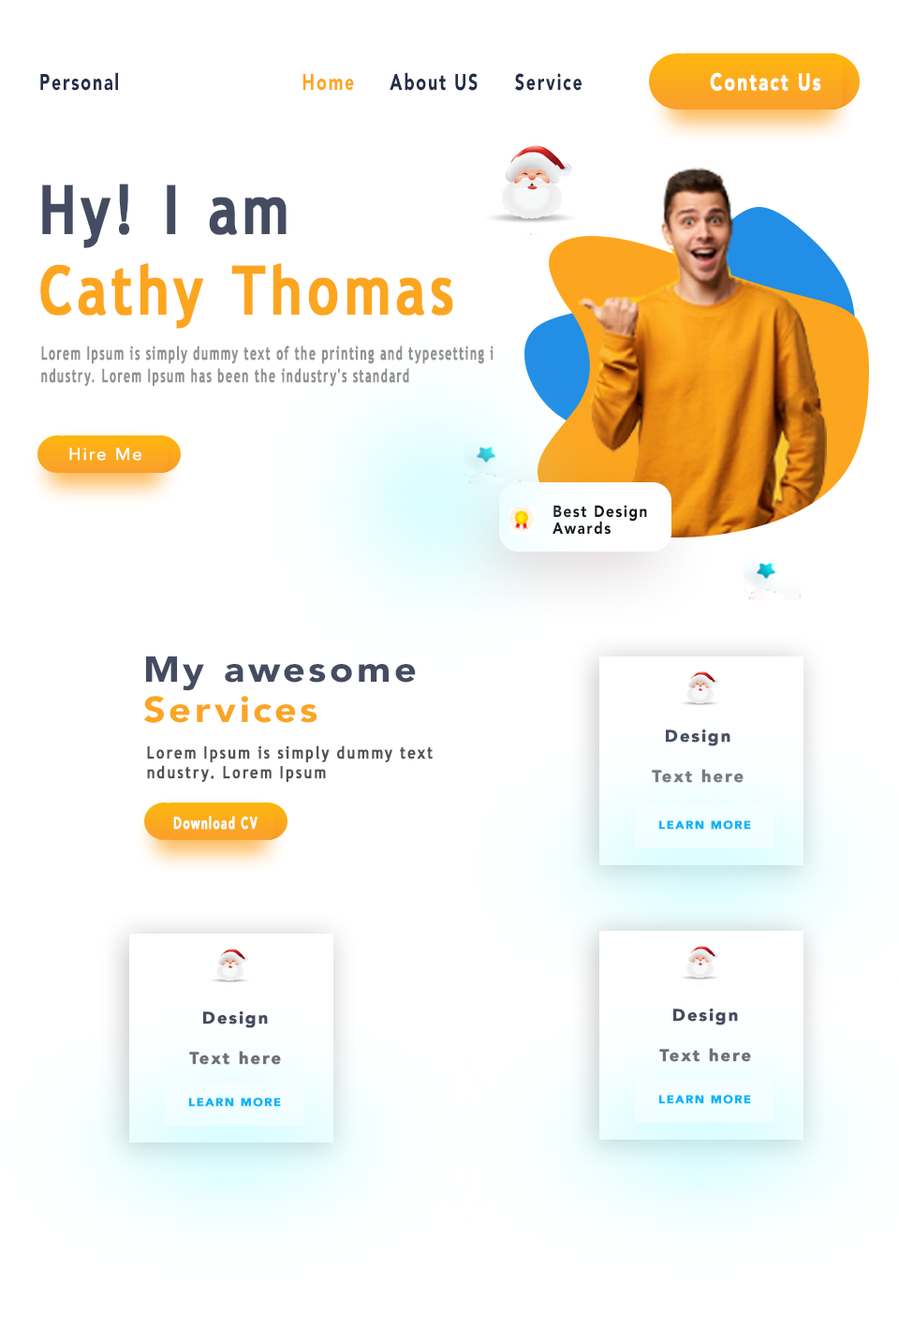
<style>
.page{position:relative;width:899px;height:1326px;background:#ffffff}
.page>*{position:absolute;margin:0}
.t1{font:22.5px "AvenirLTStd-Black";letter-spacing:0.1em;color:#242d49;scale:0.74 1}
.t2{font:22.5px "AvenirLTStd-Black";letter-spacing:0.1em;color:#fca61f;scale:0.74 1}
.t3{font:23.4px "AvenirLTStd-Black";letter-spacing:0.1em;color:#ffffff;font-weight:bold;scale:0.74 1}
.t4{font:67.4px "TrebuchetMS-Bold";letter-spacing:0.1em;color:#fca61f;font-weight:bold;scale:0.8 1}
.t5{font:67.4px "TrebuchetMS-Bold";letter-spacing:0.1em;color:#454c61;font-weight:bold;scale:0.8 1}
.t6{font:18.5px "TrebuchetMS-Bold";letter-spacing:0.1em;color:#939291;font-weight:bold;scale:0.61 1}
.t7{font:16.9px "AvenirLTStd-Roman";letter-spacing:0.1em;color:#ffffff;font-weight:bold}
.t8{font:16.4px/16.9px "AvenirLTStd-Black";letter-spacing:0.1em;color:#131313;scale:0.87 1}
.t9{font:35.8px "AvenirLTStd-Black";letter-spacing:0.1em;color:#454c61;scale:1.08 1}
.t10{font:35.8px "AvenirLTStd-Black";letter-spacing:0.1em;color:#fba524;scale:1.08 1}
.t11{font:16.9px "AvenirLTStd-Black";letter-spacing:0.1em;color:#6f7071;font-weight:bold}
.t12{font:16.9px "AvenirLTStd-Black";letter-spacing:0.1em;color:#454c61;font-weight:bold}
.t13{font:16.9px "TrebuchetMS-Bold";letter-spacing:0.1em;color:#53524f;font-weight:bold;scale:0.82 1}
.t14{font:16.9px "AvenirLTStd-Black";letter-spacing:0.1em;color:#ffffff;font-weight:bold;scale:0.64 1}
.t15{font:11.1px "AvenirLTStd-Black";letter-spacing:0.1em;color:#0ab4fb;font-weight:bold;scale:1.05 1}
</style>
<div class="page">
<p class="t1" style="left:40px;top:72px;width:781px;height:19px">Personal                    <span class="t2">Home</span>   About US   Service            <span class="t3">Contact Us</span></p>
<p class="t4" style="left:40px;top:184px;width:413px;height:145px"><span class="t5">Hy! I am<br></span>Cathy Thomas</p>
<p class="t6" style="left:41px;top:346px;width:453px;height:41px">Lorem Ipsum is simply dummy text of the printing and typesetting i<br>ndustry. Lorem Ipsum has been the industry's standard</p>
<p class="t7" style="left:69px;top:448px;width:72px;height:13px">Hire Me</p>
<p class="t8" style="left:553px;top:505px;width:94px;height:30px">Best Design<br>Awards</p>
<p class="t9" style="left:143px;top:657px;width:273px;height:66px">My awesome<br><span class="t10">Services</span></p>
<p class="t11" style="left:652px;top:730px;width:92px;height:53px;text-align:center"><span class="t12">Design<br></span><br>Text here</p>
<p class="t13" style="left:147px;top:746px;width:286px;height:36px">Lorem Ipsum is simply dummy text <br>ndustry. Lorem Ipsum</p>
<p class="t14" style="left:173px;top:816px;width:85px;height:14px">Download CV</p>
<p class="t15" style="left:659px;top:820px;width:92px;height:10px">LEARN MORE</p>
<p class="t11" style="left:189px;top:1012px;width:92px;height:53px;text-align:center"><span class="t12">Design<br></span><br>Text here</p>
<p class="t11" style="left:659px;top:1009px;width:92px;height:53px;text-align:center"><span class="t12">Design<br></span><br>Text here</p>
<p class="t15" style="left:189px;top:1098px;width:92px;height:9px">LEARN MORE</p>
<p class="t15" style="left:659px;top:1095px;width:92px;height:9px">LEARN MORE</p>
</div>
